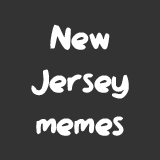
<style>
.page{position:relative;width:160px;height:160px;background:#333333}
.page>*{position:absolute;margin:0}
.t1{font:35.9px "QAReports";color:#ffffff}
</style>
<div class="page">
<p class="t1" style="left:31px;top:24px;width:98px;height:112px;text-align:center">New<br>Jersey<br>memes</p>
</div>
